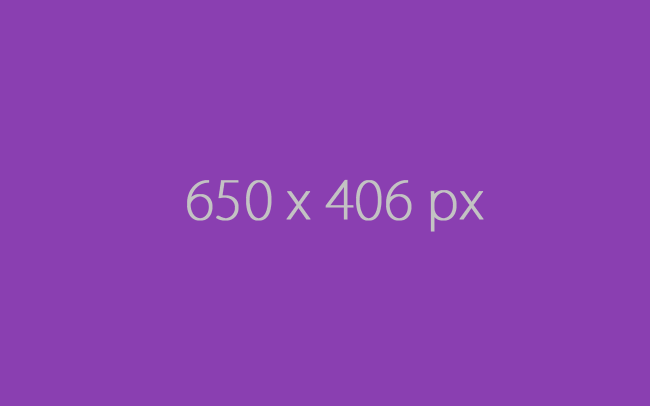
<style>
.page{position:relative;width:650px;height:406px;background:#8a3fb1}
.page>*{position:absolute;margin:0}
.t1{font:52px "KozGoPro-ExtraLight";color:#c3c3c3;font-weight:bold}
</style>
<div class="page">
<p class="t1" style="left:187px;top:179px;width:297px;height:53px">650 x 406 px</p>
</div>
